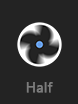
<style>
.page{position:relative;width:78px;height:104px;background:#232323}
.page>*{position:absolute;margin:0}
.t1{font:14px "SegoeUI";color:#7c7c7c;font-weight:bold}
</style>
<div class="page">
<p class="t1" style="left:26px;top:82px;width:27px;height:11px">Half</p>
</div>
